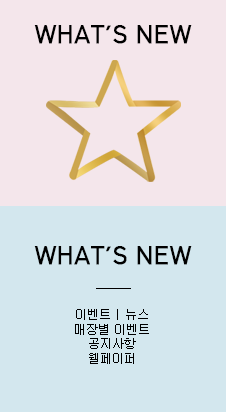
<style>
.page{position:relative;width:226px;height:412px;background:#d3e7ee}
.page>*{position:absolute;margin:0}
.t1{font:24px "HCRDotum";color:#000000;font-weight:bold}
.t2{font:12px "New-Gulim";color:#000000}
.t3{font:12px/120px "New-Gulim";color:#000000}
</style>
<div class="page">
<p class="t1" style="left:34px;top:25px;width:158px;height:19px">WHAT’S NEW</p>
<p class="t1" style="left:34px;top:246px;width:158px;height:19px">WHAT’S NEW</p>
<p class="t2" style="left:75px;top:309px;width:74px;height:55px;text-align:center"><span class="t3">이벤트 | 뉴스<br></span>매장별 이벤트<br>공지사항<br>웰페이퍼</p>
</div>
